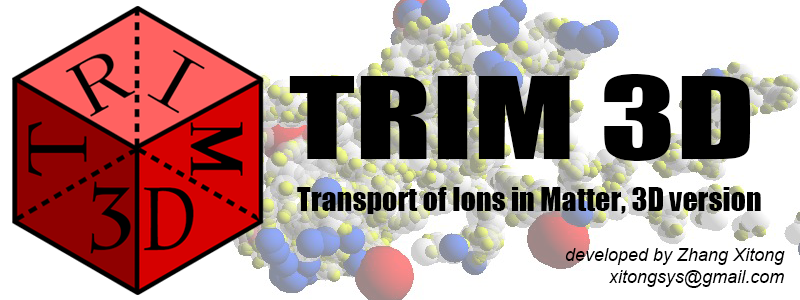
<style>
.page{position:relative;width:800px;height:300px;background:#ffffff}
.page>*{position:absolute;margin:0}
.t1{font:104.5px "Impact";color:#000000;scale:1.36 1}
.t2{font:30px "Impact";color:#000000}
.t3{font:18px "Arial-ItalicMT";color:#000000}
</style>
<div class="page">
<p class="t1" style="left:289px;top:74px;width:461px;height:87px">TRIM 3D</p>
<p class="t2" style="left:297px;top:187px;width:464px;height:27px">Transport of Ions in Matter, 3D version</p>
<p class="t3" style="left:565px;top:248px;width:220px;height:17px">developed by Zhang Xitong</p>
<p class="t3" style="left:609px;top:270px;width:175px;height:18px">xitongsys@gmail.com</p>
</div>
